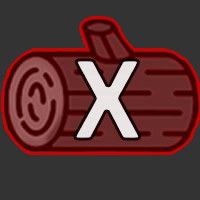
<style>
.page{position:relative;width:200px;height:200px;background:#333333}
.page>*{position:absolute;margin:0}
.t1{font:125px "Calibri-Bold";font-weight:bold}
</style>
<div class="page">
<p class="t1" style="left:73px;top:58px;width:69px;height:83px">X</p>
</div>
